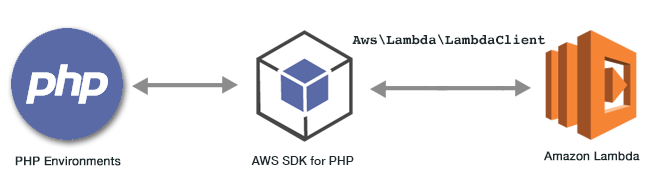
<style>
.page{position:relative;width:650px;height:190px;background:#ffffff}
.page>*{position:absolute;margin:0}
.t1{font:14px "Courier-Bold";color:#1d2a2e}
.t2{font:12px "HelveticaNeue";color:#1d2a2e;font-weight:bold}
.t3{font:12.1px "HelveticaNeue-Medium";color:#1d2a2e}
</style>
<div class="page">
<p class="t1" style="left:352px;top:34px;width:194px;height:11px">Aws\Lambda\LambdaClient</p>
<p class="t2" style="left:15px;top:156px;width:106px;height:10px">PHP Environments</p>
<p class="t3" style="left:251px;top:156px;width:103px;height:9px">AWS SDK for PHP</p>
<p class="t2" style="left:544px;top:151px;width:96px;height:10px">Amazon Lambda</p>
</div>
